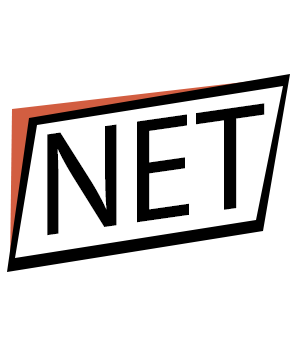
<style>
.page{position:relative;width:299px;height:345px;background:#ffffff}
.page>*{position:absolute;margin:0}
.t1{font:149.1px "MyriadPro-Regular";color:#000000;scale:0.93 1}
</style>
<div class="page">
<p class="t1" style="left:47px;top:103px;width:218px;height:133px;rotate:-8deg">NET</p>
</div>
